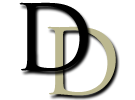
<style>
.page{position:relative;width:135px;height:100px;background:#ffffff}
.page>*{position:absolute;margin:0}
.t1{font:89.2px "TrajanPro-Regular";letter-spacing:0.22em;color:#000000}
</style>
<div class="page">
<p class="t1" style="left:19px;top:2px;width:69px;height:70px">D</p>
</div>
